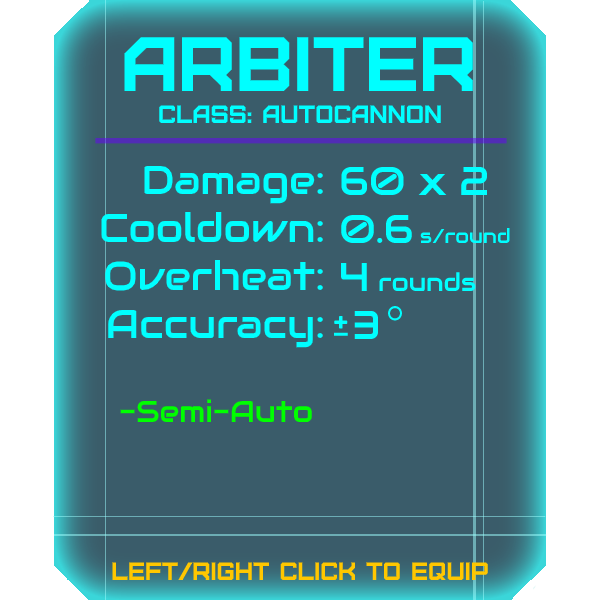
<style>
.page{position:relative;width:600px;height:600px;background:#3a5c6a}
.page>*{position:absolute;margin:0}
.t1{font:76.8px "Furore";color:#00ffff}
.t2{font:25px "Furore";color:#00ffff}
.t3{font:40px "Audiowide-Regular";color:#00ffff}
.t4{font:20px "Audiowide-Regular";color:#00ffff}
.t5{font:25px "Audiowide-Regular";color:#00ffff}
.t6{font:30px "Audiowide-Regular";color:#00ff00}
.t7{font:25px "Furore";color:#ffc700}
</style>
<div class="page">
<p class="t1" style="left:124px;top:37px;width:349px;height:54px">Arbiter</p>
<p class="t2" style="left:159px;top:105px;width:282px;height:18px">Class: autocannon</p>
<p class="t3" style="left:101px;top:165px;width:222px;height:183px;text-align:right">Damage:<br>Cooldown:<br>Overheat:<br>Accuracy:</p>
<p class="t3" style="left:341px;top:166px;width:169px;height:173px">60 x 2<br>0.6 <span class="t4">s/round<br></span>4 <span class="t5">rounds<br> </span>3</p>
<p class="t6" style="left:120px;top:399px;width:192px;height:23px"><span class="t3"><br><br><br><br><br></span>-Semi-Auto</p>
<p class="t7" style="left:112px;top:562px;width:376px;height:18px">left/right click to equip</p>
</div>
